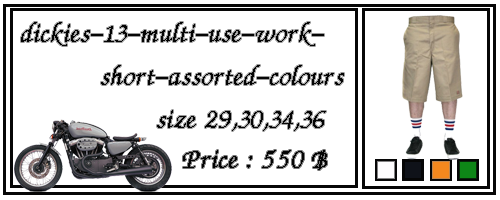
<style>
.page{position:relative;width:500px;height:200px;background:#ffffff}
.page>*{position:absolute;margin:0}
.t1{font:36px "DSUMonTaNa";color:#050505}
</style>
<div class="page">
<p class="t1" style="left:21px;top:22px;width:323px;height:109px">dickies-13-multi-use-work-<br>           short-assorted-colours<br>     size 29,30,34,36</p>
<p class="t1" style="left:183px;top:150px;width:144px;height:20px">Price : 550 ฿</p>
</div>
